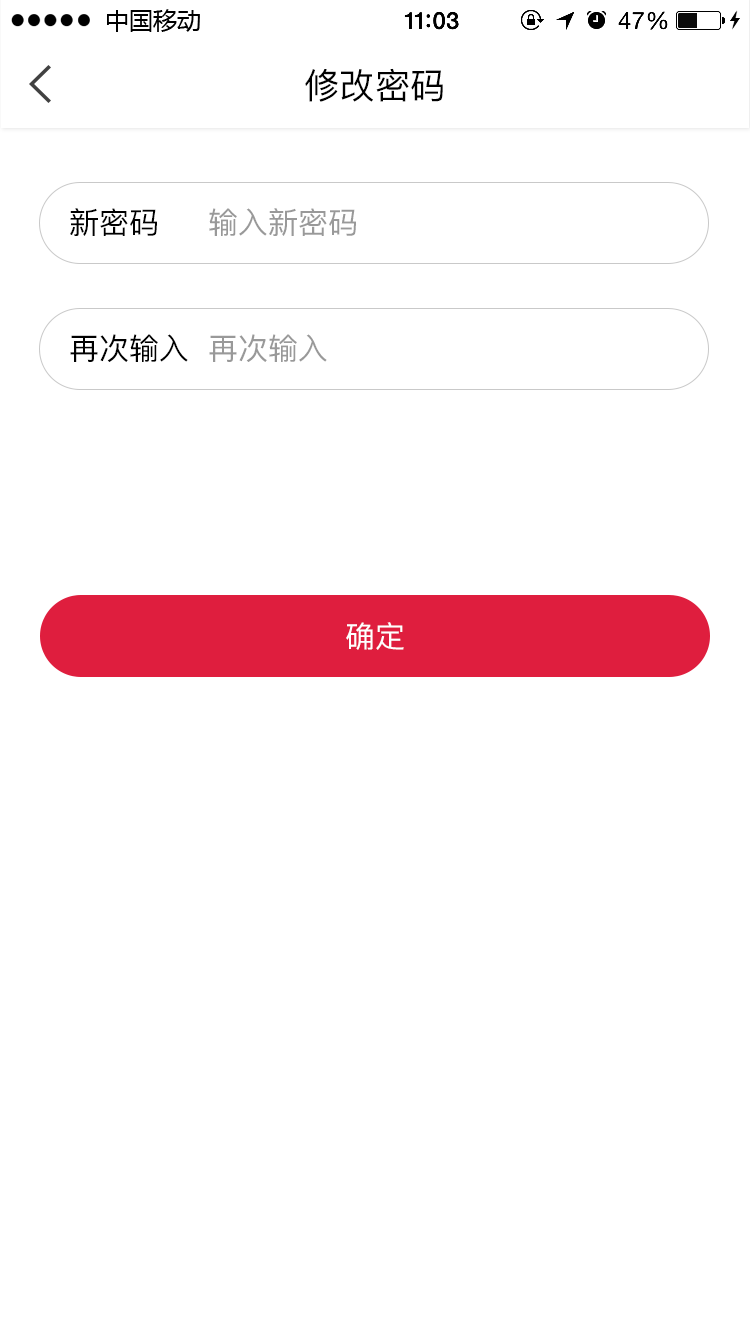
<style>
.page{position:relative;width:750px;height:1334px;background:#ffffff}
.page>*{position:absolute;margin:0}
.t1{font:35.5px "PingFang-SC-Medium";color:#000000}
.t2{font:30px "PingFang-SC-Medium";color:#000000}
.t3{font:30px "PingFang-SC-Medium";color:#999999}
.t4{font:30px "PingFang-SC-Medium";color:#ffffff}
</style>
<div class="page">
<p class="t1" style="left:305px;top:68px;width:138px;height:34px">修改密码</p>
<p class="t2" style="left:70px;top:208px;width:87px;height:28px">新密码</p>
<p class="t3" style="left:209px;top:208px;width:147px;height:28px">输入新密码</p>
<p class="t2" style="left:70px;top:334px;width:118px;height:28px">再次输入</p>
<p class="t3" style="left:209px;top:334px;width:118px;height:28px">再次输入</p>
<p class="t4" style="left:346px;top:622px;width:58px;height:28px">确定</p>
</div>
